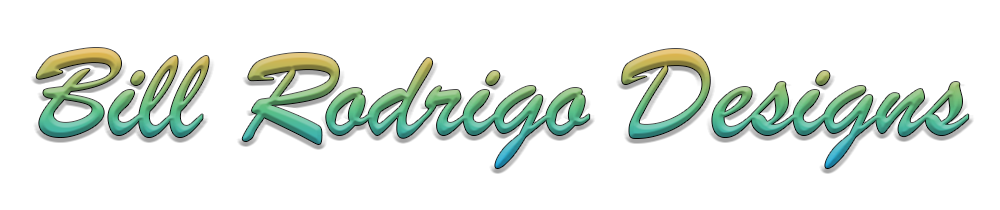
<style>
.page{position:relative;width:1000px;height:210px;background:#ffffff}
.page>*{position:absolute;margin:0}
.t1{font:134.2px "BrushScriptMT"}
</style>
<div class="page">
<p class="t1" style="left:36px;top:48px;width:933px;height:120px">Bill Rodrigo Designs</p>
</div>
